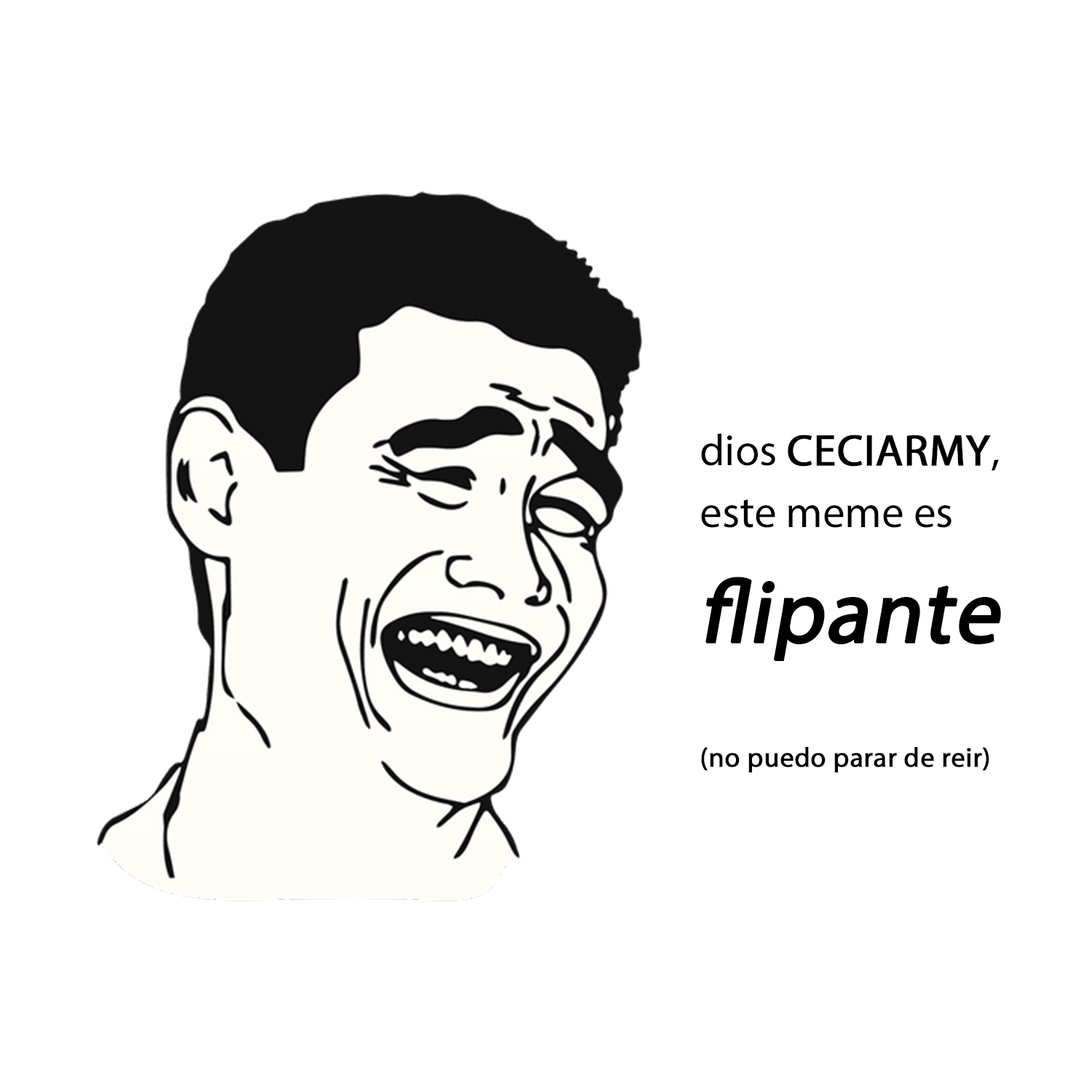
<style>
.page{position:relative;width:1092px;height:1092px;background:#ffffff}
.page>*{position:absolute;margin:0}
.t1{font:27.7px "MyriadPro-Regular";color:#000000;font-weight:bold}
.t2{font:44.4px "MyriadPro-Regular";color:#000000}
.t3{font:44.4px "MyriadPro-Regular";color:#000000;font-weight:bold}
.t4{font:88.8px "MyriadPro-Regular";color:#000000;font-weight:bold;font-style:italic}
</style>
<div class="page">
<p class="t1" style="left:701px;top:433px;width:300px;height:339px"><span class="t2">dios </span><span class="t3">CECIARMY</span><span class="t2">,<br>este meme es<br></span><span class="t4">flipante<br></span><br><br>(no puedo parar de reir)</p>
</div>
